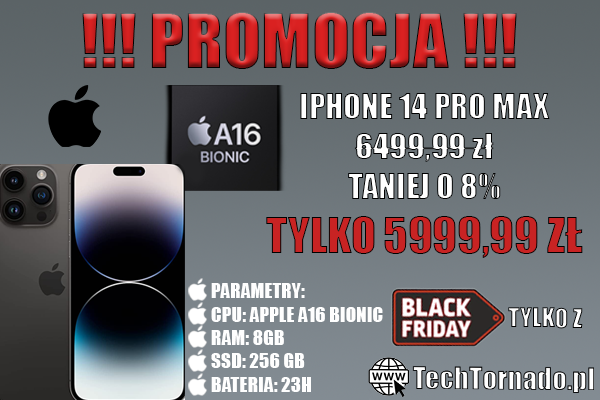
<style>
.page{position:relative;width:600px;height:400px}
.page>*{position:absolute;margin:0}
.t1{font:70.4px "Impact"}
.t2{font:33px "Impact";color:#ffffff}
.t3{font:45.5px "Impact";color:#c82323;text-transform:uppercase}
.t4{font:19.5px "Impact";color:#fefefe}
</style>
<div class="page">
<p class="t1" style="left:82px;top:12px;width:435px;height:57px">!!! PROMOCJA !!!</p>
<p class="t2" style="left:266px;top:93px;width:317px;height:165px;text-align:center">IPHONE 14 PRO MAX<br>6499,99 zł<br>TANIEJ O 8%<br><span class="t3">TYLKO 5999,99 zł</span></p>
<p class="t4" style="left:211px;top:283px;width:172px;height:109px">PARAMETRY:<br>CPU: APPLE A16 BIONIC<br>RAM: 8GB<br>SSD: 256 GB<br>BATERIA: 23H</p>
</div>
